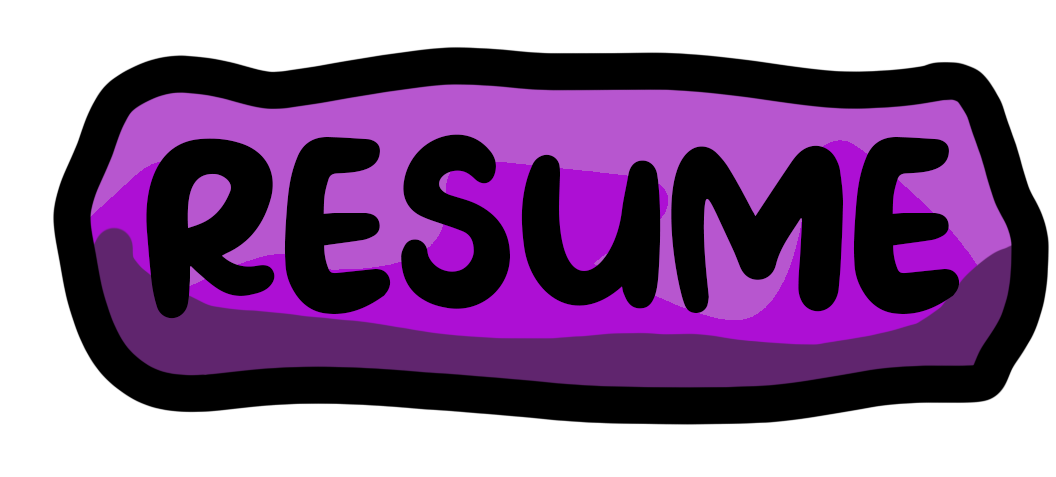
<style>
.page{position:relative;width:1056px;height:477px;background:#ffffff}
.page>*{position:absolute;margin:0}
.t1{font:200px "Pineapple-Days";color:#000000}
</style>
<div class="page">
<p class="t1" style="left:146px;top:134px;width:814px;height:185px">RESUME</p>
</div>
